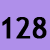
<style>
.page{position:relative;width:50px;height:50px;background:#af8fea}
.page>*{position:absolute;margin:0}
.t1{font:29.2px "TrebuchetMS";color:#000000;font-weight:bold}
</style>
<div class="page">
<p class="t1" style="left:2px;top:17px;width:45px;height:22px">128</p>
</div>
